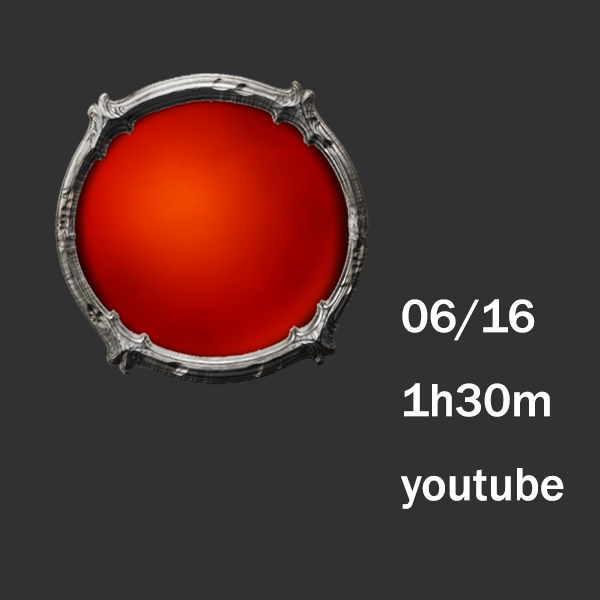
<style>
.page{position:relative;width:600px;height:600px;background:#313131}
.page>*{position:absolute;margin:0}
.t1{font:48px "FranklinGothic-Medium";color:#ffffff}
</style>
<div class="page">
<p class="t1" style="left:401px;top:299px;width:163px;height:210px">06/16<br>1h30m<br>youtube</p>
</div>
